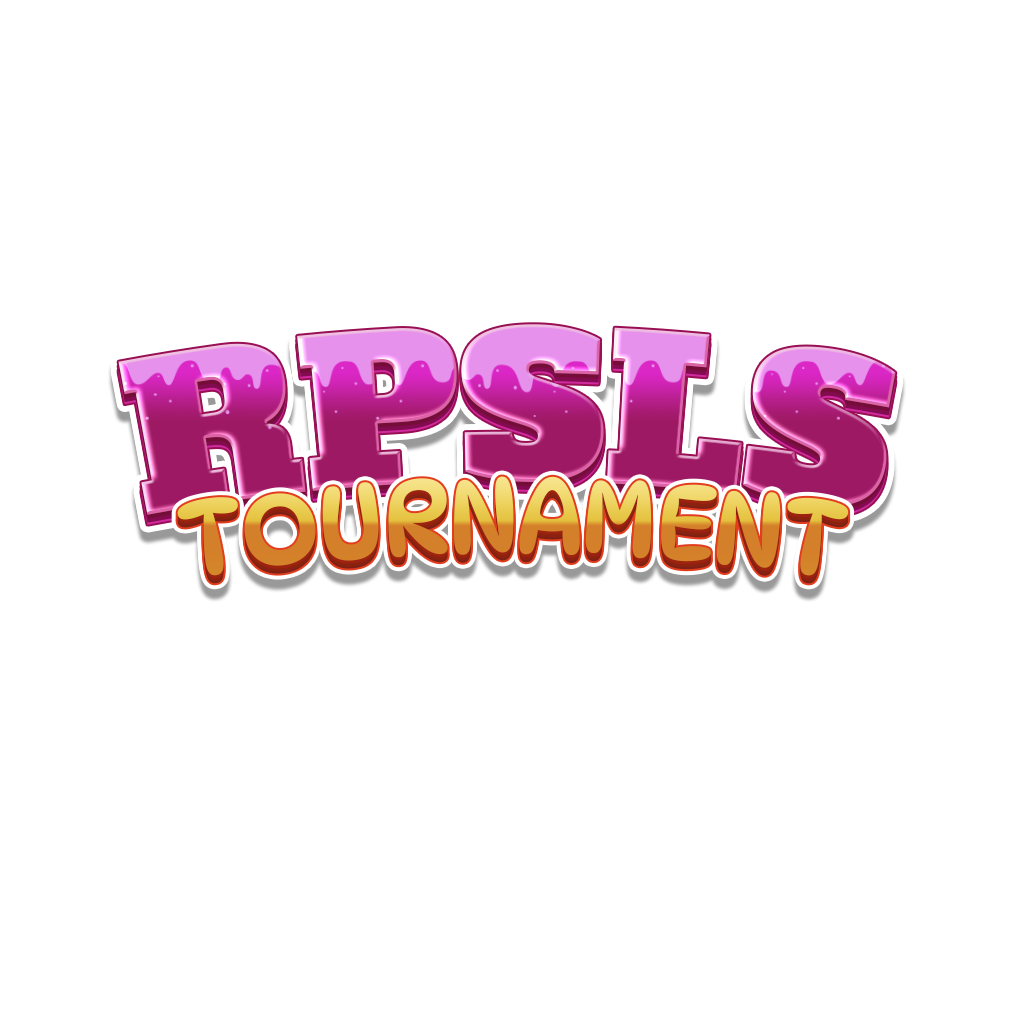
<style>
.page{position:relative;width:1024px;height:1024px;background:#ffffff}
.page>*{position:absolute;margin:0}
.t1{font:200px "AlfaSlabOne-Regular"}
.t2{font:104.2px "DynaPuff-Regular";letter-spacing:-0.04em}
</style>
<div class="page">
<p class="t1" style="left:118px;top:324px;width:778px;height:191px">RPSLS</p>
<p class="t2" style="left:177px;top:476px;width:672px;height:100px">TOURNAMENT</p>
</div>
